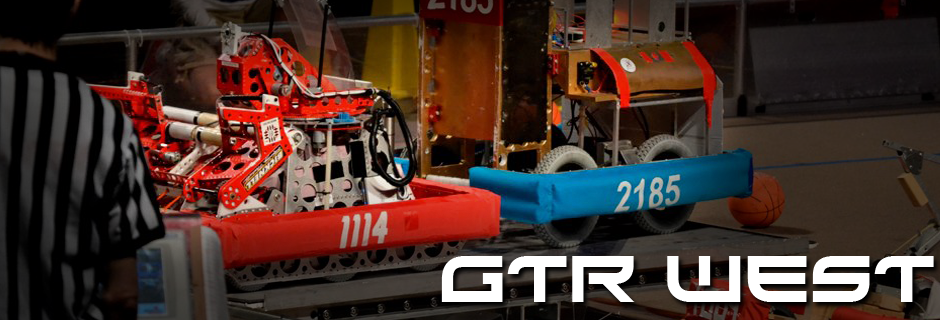
<style>
.page{position:relative;width:940px;height:320px}
.page>*{position:absolute;margin:0}
.t1{font:65.5px "Xirod-Regular";color:#ffffff}
</style>
<div class="page">
<p class="t1" style="left:441px;top:256px;width:493px;height:46px">GTR West</p>
</div>
